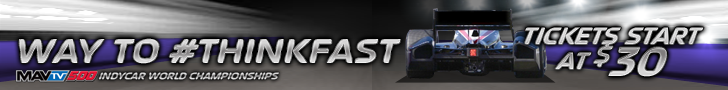
<style>
.page{position:relative;width:728px;height:90px}
.page>*{position:absolute;margin:0}
.t1{font:32.4px/24.5px "SeptemberBoldItalic";text-transform:uppercase;font-style:italic}
.t2{font:55.4px/24.5px "SeptemberBoldItalic";text-transform:uppercase;font-style:italic}
.t3{font:46.8px "SeptemberBoldItalic";text-transform:uppercase}
</style>
<div class="page">
<p class="t1" style="left:525px;top:27px;width:179px;height:50px;text-align:center">tickets start<br>at <span class="t2">$30</span></p>
<p class="t3" style="left:19px;top:38px;width:382px;height:26px">Way to #ThinkFast</p>
</div>
